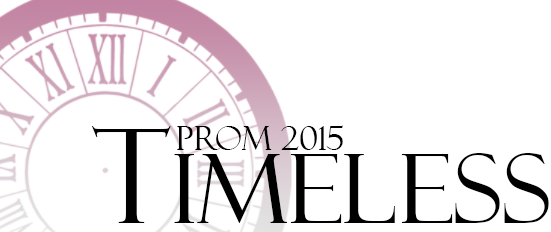
<style>
.page{position:relative;width:551px;height:232px;background:#ffffff}
.page>*{position:absolute;margin:0}
.t1{font:95.9px "FelixTitlingMT";color:#000000;scale:1.06 1}
.t2{font:130px "FelixTitlingMT";color:#000000}
.t3{font:33px "FelixTitlingMT";color:#000000}
</style>
<div class="page">
<p class="t1" style="left:91px;top:126px;width:458px;height:97px"><span class="t2">T</span>IMELESS</p>
<p class="t3" style="left:177px;top:125px;width:166px;height:25px">Prom 2015</p>
</div>
